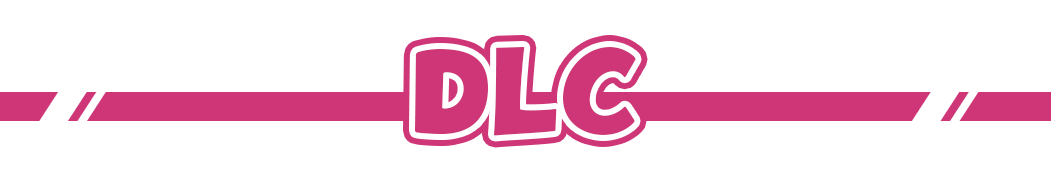
<style>
.page{position:relative;width:1051px;height:183px;background:#ffffff}
.page>*{position:absolute;margin:0}
.t1{font:127.2px "PeachyKeenJF";color:#ce3677}
</style>
<div class="page">
<p class="t1" style="left:415px;top:47px;width:221px;height:89px">DLC</p>
</div>
